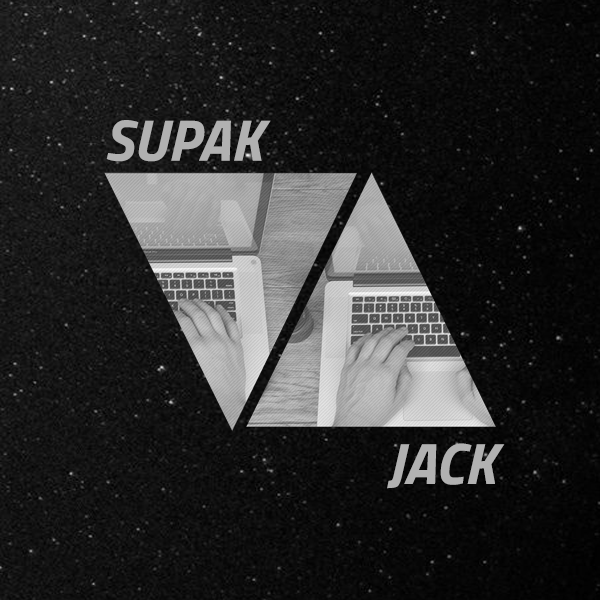
<style>
.page{position:relative;width:600px;height:600px}
.page>*{position:absolute;margin:0}
.t1{font:58.3px "TitilliumWeb-BoldItalic";color:#b1b1b1}
</style>
<div class="page">
<p class="t1" style="left:106px;top:120px;width:165px;height:42px">SUPAK</p>
<p class="t1" style="left:387px;top:443px;width:118px;height:46px">JACK</p>
</div>
